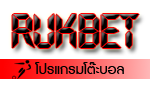
<style>
.page{position:relative;width:150px;height:90px;background:#ffffff}
.page>*{position:absolute;margin:0}
.t1{font:48px "Transistor";color:#000000}
.t2{font:18px "DBAdmanX";color:#000000}
</style>
<div class="page">
<p class="t1" style="left:12px;top:14px;width:127px;height:34px">RUKbet</p>
<p class="t2" style="left:35px;top:62px;width:89px;height:12px">โปรแกรมโต๊ะบอล</p>
</div>
